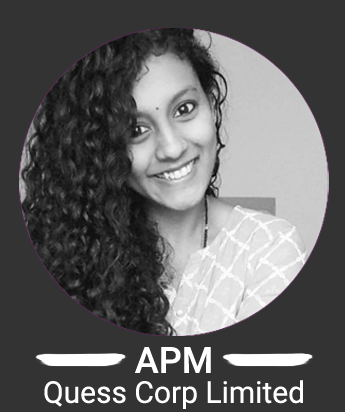
<style>
.page{position:relative;width:345px;height:412px;background:#333333}
.page>*{position:absolute;margin:0}
.t1{font:30px/30px "Roboto-Regular";color:#ffffff}
.t2{font:36px/30px "Roboto-Medium";color:#ffffff}
</style>
<div class="page">
<p class="t1" style="left:44px;top:347px;width:259px;height:62px;text-align:center"><span class="t2">APM<br></span>Quess Corp Limited</p>
</div>
